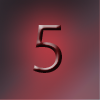
<style>
.page{position:relative;width:100px;height:100px}
.page>*{position:absolute;margin:0}
.t1{font:72px "MyriadPro-Regular"}
</style>
<div class="page">
<p class="t1" style="left:33px;top:25px;width:29px;height:48px">5</p>
</div>
